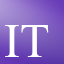
<style>
.page{position:relative;width:64px;height:64px}
.page>*{position:absolute;margin:0}
.t1{font:48px "TimesNewRomanPSMT";color:#ffffff}
</style>
<div class="page">
<p class="t1" style="left:5px;top:25px;width:44px;height:32px">IT</p>
</div>
